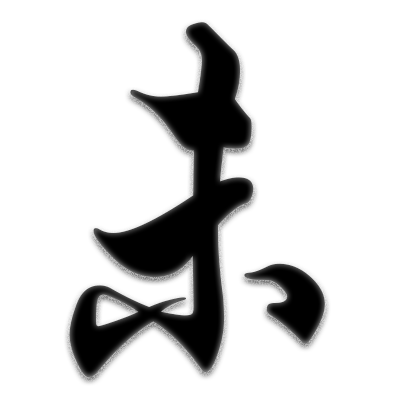
<style>
.page{position:relative;width:400px;height:400px;background:#ffffff}
.page>*{position:absolute;margin:0}
.t1{font:400px "STXingkai";color:#000000}
</style>
<div class="page">
<p class="t1" style="left:69px;top:22px;width:256px;height:355px">未</p>
</div>
